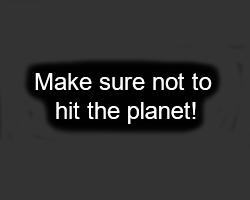
<style>
.page{position:relative;width:250px;height:200px;background:#333333}
.page>*{position:absolute;margin:0}
.t1{font:24px "ArialMT";color:#ffffff}
</style>
<div class="page">
<p class="t1" style="left:35px;top:73px;width:177px;height:51px;text-align:center">Make sure not to <br>hit the planet!</p>
</div>
